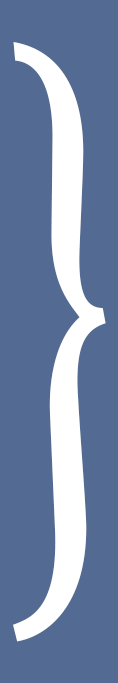
<style>
.page{position:relative;width:118px;height:683px;background:#536b93}
.page>*{position:absolute;margin:0}
.t1{font:660px "CharlemagneStd-Bold";letter-spacing:0.19em;color:#ffffff;scale:0.5 1}
</style>
<div class="page">
<p class="t1" style="left:13px;top:42px;width:93px;height:600px">}</p>
</div>
